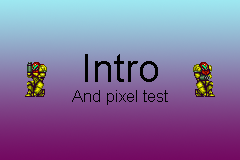
<style>
.page{position:relative;width:240px;height:160px}
.page>*{position:absolute;margin:0}
.t1{font:16.7px "ArialMT";color:#000000}
.t2{font:39.5px "ArialMT";color:#000000}
</style>
<div class="page">
<p class="t1" style="left:72px;top:54px;width:96px;height:51px;text-align:center"><span class="t2">Intro<br></span>And pixel test</p>
</div>
